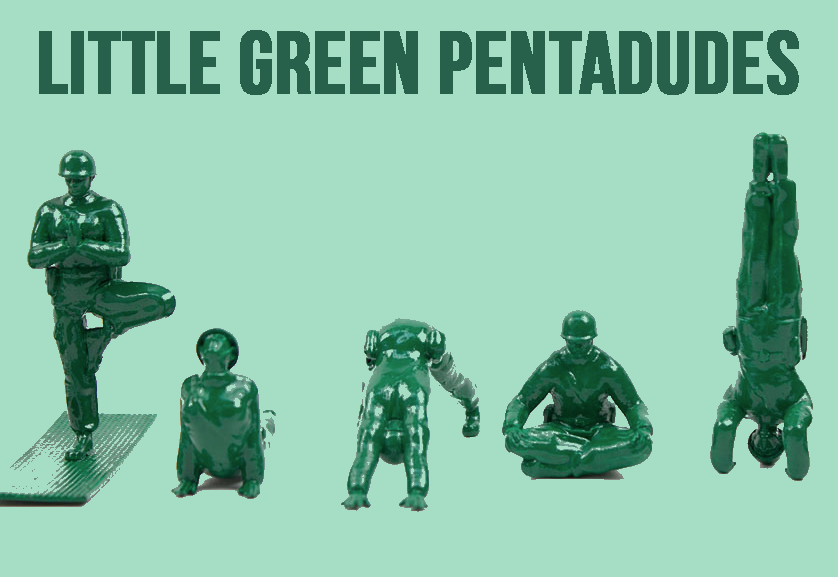
<style>
.page{position:relative;width:838px;height:577px;background:#a6ddc5}
.page>*{position:absolute;margin:0}
.t1{font:88px "BebasNeue";color:#28614b;font-weight:bold}
</style>
<div class="page">
<p class="t1" style="left:39px;top:30px;width:760px;height:65px">LITTLE GREEN PENTADUDES</p>
</div>
